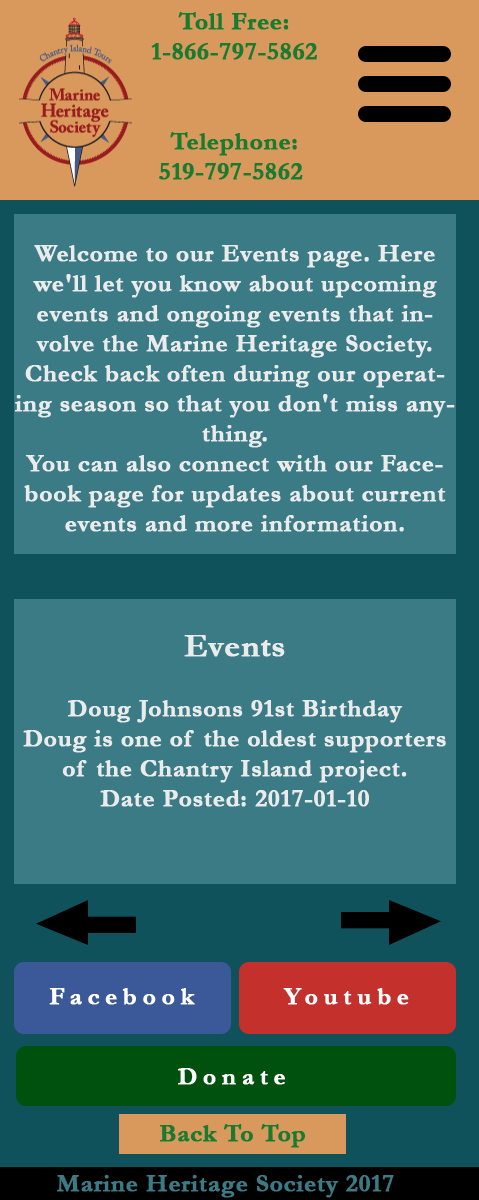
<style>
.page{position:relative;width:479px;height:1200px;background:#3a7b85}
.page>*{position:absolute;margin:0}
.t1{font:25px "Garamond-Bold";color:#197b30;font-weight:bold}
.t2{font:25px "Garamond-Bold";color:#ebebeb;font-weight:bold}
.t3{font:33.3px "Garamond-Bold";color:#ebebeb;font-weight:bold}
.t4{font:25px "Garamond-Bold";letter-spacing:0.2em;color:#fefefe;font-weight:bold}
.t5{font:25px "Garamond-Bold";letter-spacing:0.2em;color:#ffffff;font-weight:bold}
.t6{font:25px "Garamond-Bold";color:#3a7b85;font-weight:bold}
</style>
<div class="page">
<p class="t1" style="left:151px;top:12px;width:166px;height:48px;text-align:center">Toll Free:<br>1-866-797-5862</p>
<p class="t1" style="left:159px;top:132px;width:144px;height:48px;text-align:center">Telephone:<br>519-797-5862</p>
<p class="t2" style="left:15px;top:245px;width:440px;height:287px;text-align:center">Welcome to our Events page. Here we'll let you know about upcoming events and ongoing events that involve the Marine Heritage Society. Check back often during our operating season so that you don't miss anything.<br>You can also connect with our Facebook page for updates about current events and more information.</p>
<p class="t2" style="left:23px;top:635px;width:423px;height:172px;text-align:center"><span class="t3"><br><br>Events<br></span><br>Doug Johnsons 91st Birthday<br>Doug is one of the oldest supporters of the Chantry Island project.<br>Date Posted: 2017-01-10</p>
<p class="t4" style="left:49px;top:988px;width:146px;height:17px">Facebook</p>
<p class="t5" style="left:283px;top:988px;width:126px;height:17px">Youtube</p>
<p class="t5" style="left:178px;top:1068px;width:107px;height:17px">Donate</p>
<p class="t1" style="left:160px;top:1124px;width:145px;height:24px">Back To Top</p>
<p class="t6" style="left:57px;top:1175px;width:337px;height:23px">Marine Heritage Society 2017</p>
</div>
